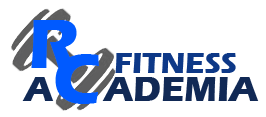
<style>
.page{position:relative;width:266px;height:117px;background:#ffffff}
.page>*{position:absolute;margin:0}
.t1{font:72px "ErasITC-Bold";letter-spacing:-0.01em;color:#005aff;text-transform:uppercase}
.t2{font:30px "ErasITC-Bold";letter-spacing:-0.01em;color:#0d3887;text-transform:uppercase}
.t3{font:36px "ErasITC-Bold";letter-spacing:-0.01em;color:#112955;text-transform:uppercase}
</style>
<div class="page">
<p class="t1" style="left:31px;top:20px;width:46px;height:48px">r</p>
<p class="t1" style="left:55px;top:54px;width:44px;height:50px">c</p>
<p class="t2" style="left:115px;top:53px;width:121px;height:20px">fitness</p>
<p class="t3" style="left:22px;top:77px;width:237px;height:24px">a      ademia</p>
</div>
